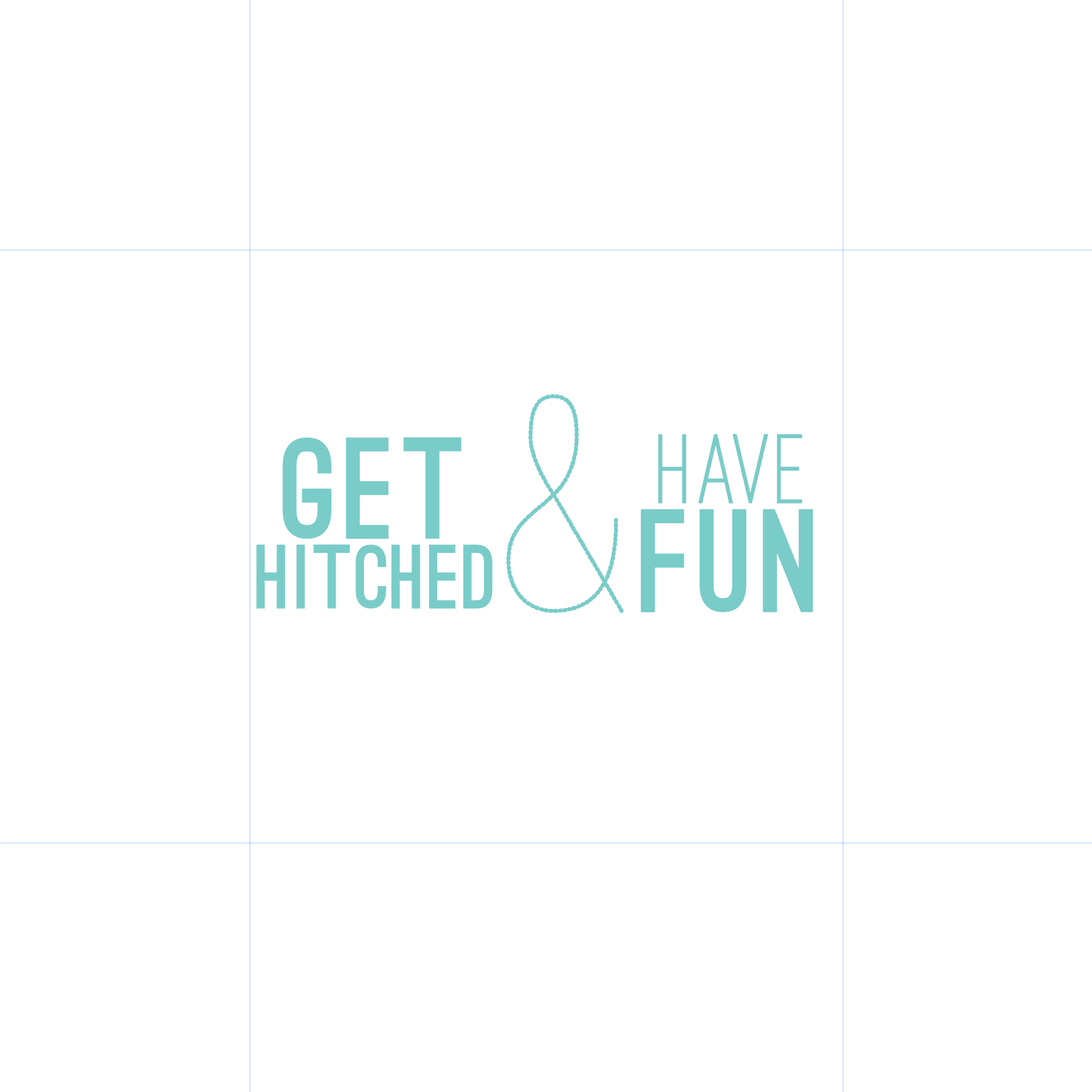
<style>
.page{position:relative;width:1092px;height:1092px;background:#ffffff}
.page>*{position:absolute;margin:0}
.t1{font:333.8px "OstrichSansDashed-Medium";letter-spacing:0.025em;color:#7accc8;font-weight:bold}
.t2{font:86.5px/70.2px "OstrichSans-Black";letter-spacing:0.025em;color:#7accc8}
.t3{font:136px/70.2px "OstrichSans-Black";letter-spacing:0.025em;color:#7accc8;font-weight:bold}
.t4{font:101.4px/89px "OstrichSans-Medium";letter-spacing:0.025em;color:#7accc8;font-weight:bold}
.t5{font:138.5px/108.8px "OstrichSans-Black";letter-spacing:0.025em;color:#7accc8;font-weight:bold}
</style>
<div class="page">
<p class="t1" style="left:506px;top:394px;width:118px;height:219px">&amp;</p>
<p class="t2" style="left:256px;top:437px;width:237px;height:172px;text-align:center"><span class="t3">GET<br></span>HITCHED</p>
<p class="t4" style="left:640px;top:434px;width:173px;height:178px;text-align:center">HAVE<br><span class="t5">FUN</span></p>
</div>
